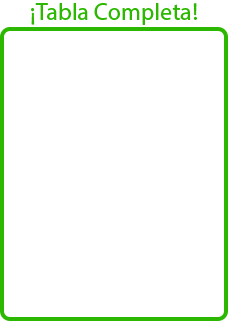
<style>
.page{position:relative;width:229px;height:322px;background:#ffffff}
.page>*{position:absolute;margin:0}
.t1{font:24px "MyriadHebrew-Regular";color:#2cb800}
</style>
<div class="page">
<p class="t1" style="left:31px;top:3px;width:166px;height:22px">¡Tabla Completa!</p>
</div>
